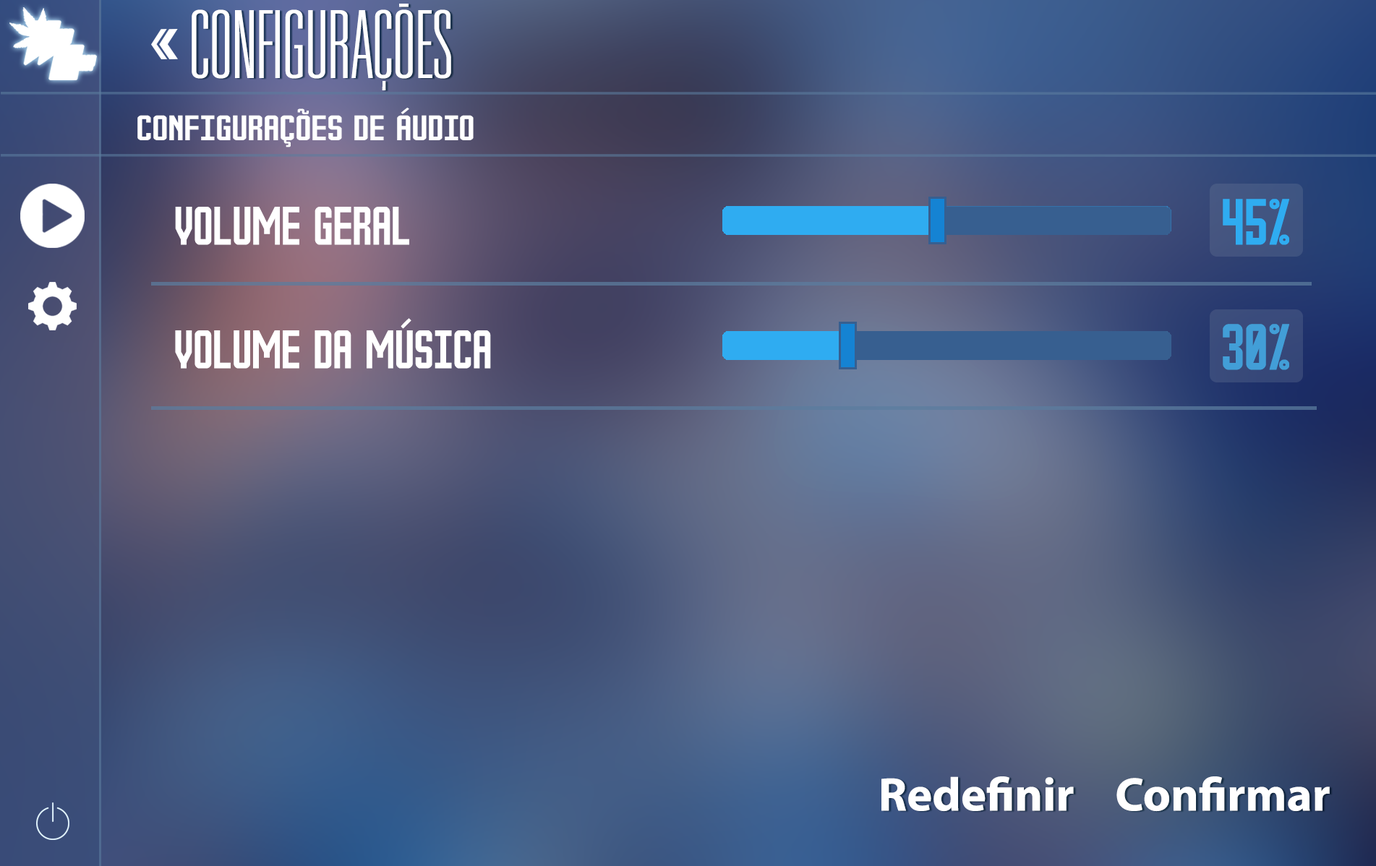
<style>
.page{position:relative;width:1376px;height:866px}
.page>*{position:absolute;margin:0}
.t1{font:94px "UniversalAccreditation";color:#ffffff}
.t2{font:108.5px "MyriadPro-Bold";color:#ffffff}
.t3{font:28.3px "TheOutboxSt";color:#ffffff;scale:1.25 1}
.t4{font:43.4px "TheOutboxSt";color:#ffffff}
.t5{font:52.1px "TheOutboxSt";color:#2facf1}
.t6{font:52.1px "TheOutboxSt";color:#429ed7}
.t7{font:47.3px "MyriadPro-Bold";color:#ffffff}
</style>
<div class="page">
<p class="t1" style="left:399px;top:4px;width:10px;height:3px;text-align:center">-<br><span class="t2"><br>e</span></p>
<p class="t1" style="left:192px;top:9px;width:259px;height:70px;text-align:center">CONFIGURACOES <br><span class="t2"><br>e</span></p>
<p class="t1" style="left:382px;top:81px;width:4px;height:9px;text-align:center;rotate:-90deg">-<br><span class="t2"><br>e</span></p>
<p class="t3" style="left:137px;top:108px;width:337px;height:40px">configurações de áudio</p>
<p class="t4" style="left:175px;top:207px;width:234px;height:38px">volume geral</p>
<p class="t5" style="left:1223px;top:199px;width:66px;height:46px">45%</p>
<p class="t4" style="left:175px;top:318px;width:316px;height:51px">volume da música</p>
<p class="t6" style="left:1223px;top:324px;width:66px;height:46px">30%</p>
<p class="t7" style="left:882px;top:777px;width:192px;height:35px;text-align:center">Redefinir<br><br>e</p>
<p class="t7" style="left:1117px;top:777px;width:213px;height:35px;text-align:center">Confirmar<br><br>e</p>
</div>
